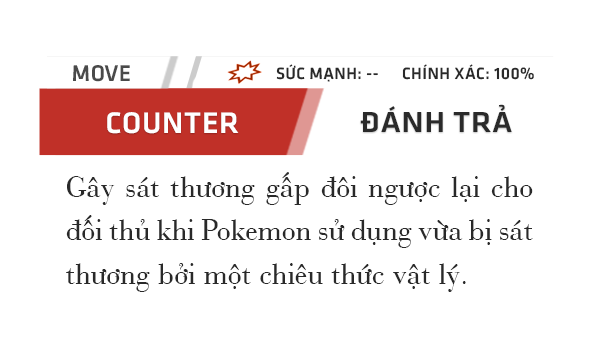
<style>
.page{position:relative;width:600px;height:360px;background:#ffffff}
.page>*{position:absolute;margin:0}
.t1{font:23.6px "UTM-Facebook-K&T";letter-spacing:0.02em;color:#4a4a4a}
.t2{font:17px "UTM-Facebook-K&T";letter-spacing:0.02em;color:#292929}
.t3{font:30.9px "UTM-Facebook-K&T";letter-spacing:0.02em;color:#ffffff}
.t4{font:30px "UTM-Facebook-K&T";letter-spacing:0.02em;color:#2a2a2a;scale:1.06 1}
.t5{font:30.9px/43.3px "UVNBachDang";letter-spacing:0.02em;color:#292929}
</style>
<div class="page">
<p class="t1" style="left:73px;top:65px;width:57px;height:17px">MOVE</p>
<p class="t2" style="left:276px;top:64px;width:102px;height:18px">SỨC MẠNH: --</p>
<p class="t2" style="left:402px;top:64px;width:132px;height:16px">CHÍNH XÁC: 100%</p>
<p class="t3" style="left:107px;top:112px;width:132px;height:22px">COUNTER</p>
<p class="t4" style="left:360px;top:104px;width:152px;height:28px">ĐÁNH TRẢ</p>
<p class="t5" style="left:66px;top:172px;width:467px;height:120px;text-align:justify">Gây sát thương gấp đôi ngược lại cho đối thủ khi Pokemon sử dụng vừa bị sát thương bởi một chiêu thức vật lý.</p>
</div>
